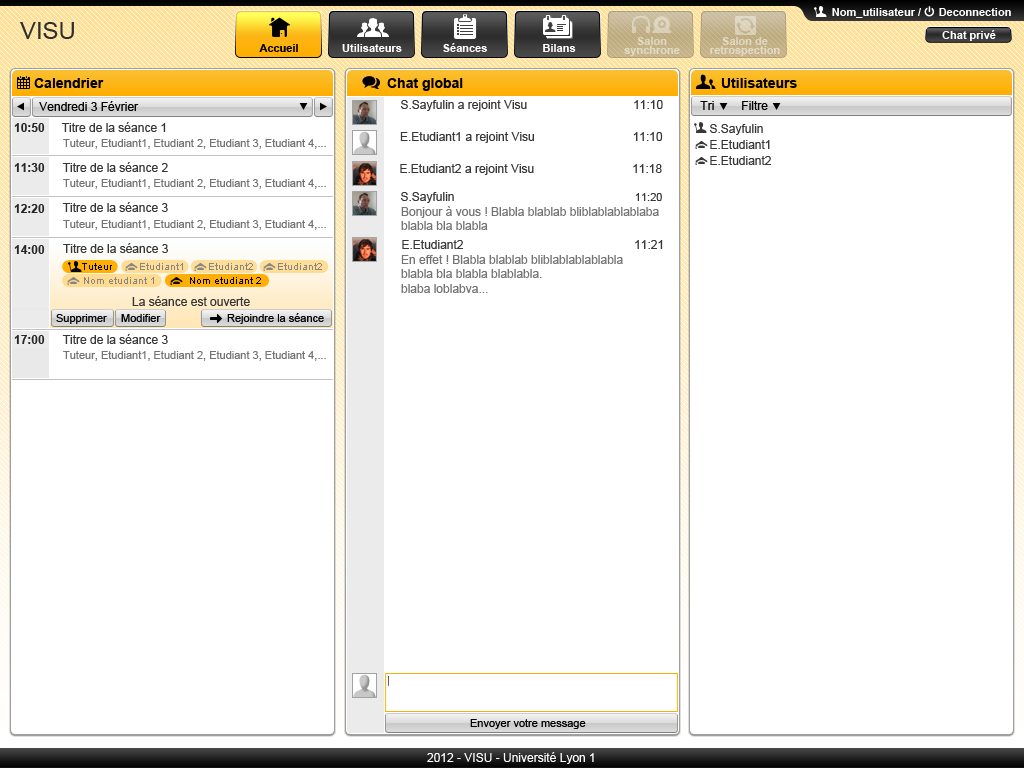
<style>
.page{position:relative;width:1024px;height:768px;background:#ffffff}
.page>*{position:absolute;margin:0}
.t1{font:11px "Arial-BoldMT";color:#ffffff}
.t2{font:24px "ArialMT";color:#2e2e2e}
.t3{font:11px/9px "Arial-BoldMT";color:#e3d8c2}
.t4{font:11px/9px "Arial-BoldMT";color:#e2d7c2}
.t5{font:11px "Arial-BoldMT";color:#010101}
.t6{font:14px "Arial-BoldMT";color:#000000}
.t7{font:12px "ArialMT";color:#000000}
.t8{font:12px "ArialMT";color:#373737}
.t9{font:12px "Arial-BoldMT";color:#272727}
.t10{font:12px "ArialMT";color:#363636}
.t11{font:11px "ArialMT";color:#737373}
.t12{font:11px "ArialMT";color:#373737}
.t13{font:12px "ArialMT";color:#737373}
.t14{font:10px "ArialMT";color:#000000}
.t15{font:10px "ArialMT";color:#868686}
.t16{font:11px "ArialMT";color:#000000}
.t17{font:12px "ArialMT";color:#fefefe}
</style>
<div class="page">
<p class="t1" style="left:832px;top:8px;width:89px;height:10px">Nom_utilisateur /</p>
<p class="t1" style="left:939px;top:8px;width:72px;height:8px">Deconnection</p>
<p class="t2" style="left:20px;top:22px;width:54px;height:17px">VISU</p>
<p class="t1" style="left:942px;top:30px;width:54px;height:11px">Chat privé</p>
<p class="t3" style="left:624px;top:37px;width:56px;height:19px;text-align:center">Salon<br>synchrone</p>
<p class="t4" style="left:710px;top:37px;width:70px;height:19px;text-align:center">Salon de<br>retrospection</p>
<p class="t5" style="left:259px;top:44px;width:39px;height:8px">Accueil</p>
<p class="t1" style="left:342px;top:44px;width:60px;height:8px">Utilisateurs</p>
<p class="t1" style="left:443px;top:43px;width:44px;height:9px">Séances</p>
<p class="t1" style="left:543px;top:44px;width:33px;height:8px">Bilans</p>
<p class="t6" style="left:34px;top:78px;width:70px;height:10px">Calendrier</p>
<p class="t6" style="left:387px;top:78px;width:76px;height:13px">Chat global</p>
<p class="t6" style="left:721px;top:78px;width:76px;height:10px">Utilisateurs</p>
<p class="t7" style="left:39px;top:101px;width:100px;height:10px">Vendredi 3 Février</p>
<p class="t8" style="left:401px;top:100px;width:262px;height:11px">S.Sayfulin a rejoint Visu          11:10</p>
<p class="t7" style="left:700px;top:101px;width:14px;height:9px">Tri</p>
<p class="t7" style="left:742px;top:101px;width:26px;height:9px">Filtre</p>
<p class="t9" style="left:14px;top:123px;width:31px;height:9px">10:50</p>
<p class="t10" style="left:61px;top:122px;width:105px;height:10px">Titre de la séance 1</p>
<p class="t8" style="left:710px;top:124px;width:53px;height:11px">S.Sayfulin</p>
<p class="t8" style="left:400px;top:132px;width:263px;height:11px">E.Etudiant1 a rejoint Visu          11:10</p>
<p class="t11" style="left:63px;top:139px;width:263px;height:10px">Tuteur, Etudiant1, Etudiant 2, Etudiant 3, Etudiant 4,...</p>
<p class="t8" style="left:710px;top:140px;width:60px;height:9px">E.Etudiant1</p>
<p class="t8" style="left:710px;top:156px;width:61px;height:9px">E.Etudiant2</p>
<p class="t9" style="left:14px;top:163px;width:31px;height:9px">11:30</p>
<p class="t8" style="left:62px;top:162px;width:106px;height:10px">Titre de la séance 2</p>
<p class="t8" style="left:400px;top:164px;width:262px;height:11px">E.Etudiant2 a rejoint Visu          11:18</p>
<p class="t11" style="left:63px;top:179px;width:263px;height:10px">Tuteur, Etudiant1, Etudiant 2, Etudiant 3, Etudiant 4,...</p>
<p class="t8" style="left:401px;top:192px;width:261px;height:11px">S.Sayfulin           <span class="t12">11:20</span></p>
<p class="t9" style="left:14px;top:204px;width:31px;height:9px">12:20</p>
<p class="t8" style="left:62px;top:202px;width:106px;height:10px">Titre de la séance 3</p>
<p class="t13" style="left:401px;top:206px;width:258px;height:24px">Bonjour à vous ! Blabla blablab bliblablablablaba<br>blabla bla blabla</p>
<p class="t11" style="left:63px;top:220px;width:263px;height:10px">Tuteur, Etudiant1, Etudiant 2, Etudiant 3, Etudiant 4,...</p>
<p class="t9" style="left:14px;top:245px;width:31px;height:9px">14:00</p>
<p class="t8" style="left:63px;top:243px;width:105px;height:10px">Titre de la séance 3</p>
<p class="t8" style="left:402px;top:240px;width:261px;height:9px">E.Etudiant2          11:21</p>
<p class="t13" style="left:401px;top:255px;width:222px;height:38px">En effet ! Blabla blablab bliblablablablabla<br>blabla bla blabla blablabla.<br>blaba loblabva...</p>
<p class="t14" style="left:82px;top:263px;width:30px;height:7px">Tuteur</p>
<p class="t15" style="left:140px;top:263px;width:43px;height:7px">Etudiant1</p>
<p class="t15" style="left:209px;top:263px;width:44px;height:7px">Etudiant2</p>
<p class="t15" style="left:278px;top:263px;width:44px;height:7px">Etudiant2</p>
<p class="t15" style="left:84px;top:277px;width:70px;height:7px">Nom etudiant 1</p>
<p class="t14" style="left:190px;top:277px;width:71px;height:7px">Nom etudiant 2</p>
<p class="t8" style="left:132px;top:296px;width:118px;height:10px">La séance est ouverte</p>
<p class="t16" style="left:56px;top:314px;width:51px;height:10px">Supprimer</p>
<p class="t16" style="left:121px;top:314px;width:40px;height:8px">Modifier</p>
<p class="t16" style="left:227px;top:313px;width:97px;height:11px">Rejoindre la séance</p>
<p class="t9" style="left:14px;top:335px;width:31px;height:9px">17:00</p>
<p class="t8" style="left:62px;top:334px;width:106px;height:10px">Titre de la séance 3</p>
<p class="t11" style="left:63px;top:351px;width:263px;height:10px">Tuteur, Etudiant1, Etudiant 2, Etudiant 3, Etudiant 4,...</p>
<p class="t16" style="left:470px;top:719px;width:116px;height:10px">Envoyer votre message</p>
<p class="t17" style="left:427px;top:752px;width:167px;height:12px">2012 - VISU - Université Lyon 1</p>
</div>
